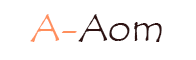
<style>
.page{position:relative;width:196px;height:60px;background:#ffffff}
.page>*{position:absolute;margin:0}
.t1{font:39px "TempusSansITC";color:#2e1212}
.t2{font:39px "TempusSansITC";color:#ff8f5d}
</style>
<div class="page">
<p class="t1" style="left:30px;top:14px;width:132px;height:28px"><span class="t2">A-</span>Aom</p>
</div>
